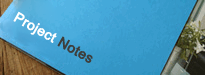
<style>
.page{position:relative;width:205px;height:75px}
.page>*{position:absolute;margin:0}
.t1{font:14px "ArialMT";color:#ffffff;font-weight:bold}
.t2{font:14px "ArialMT";color:#3d3e3c;font-weight:bold}
</style>
<div class="page">
<p class="t1" style="left:13px;top:11px;width:80px;height:52px;rotate:29deg">Project <span class="t2">Notes</span></p>
</div>
